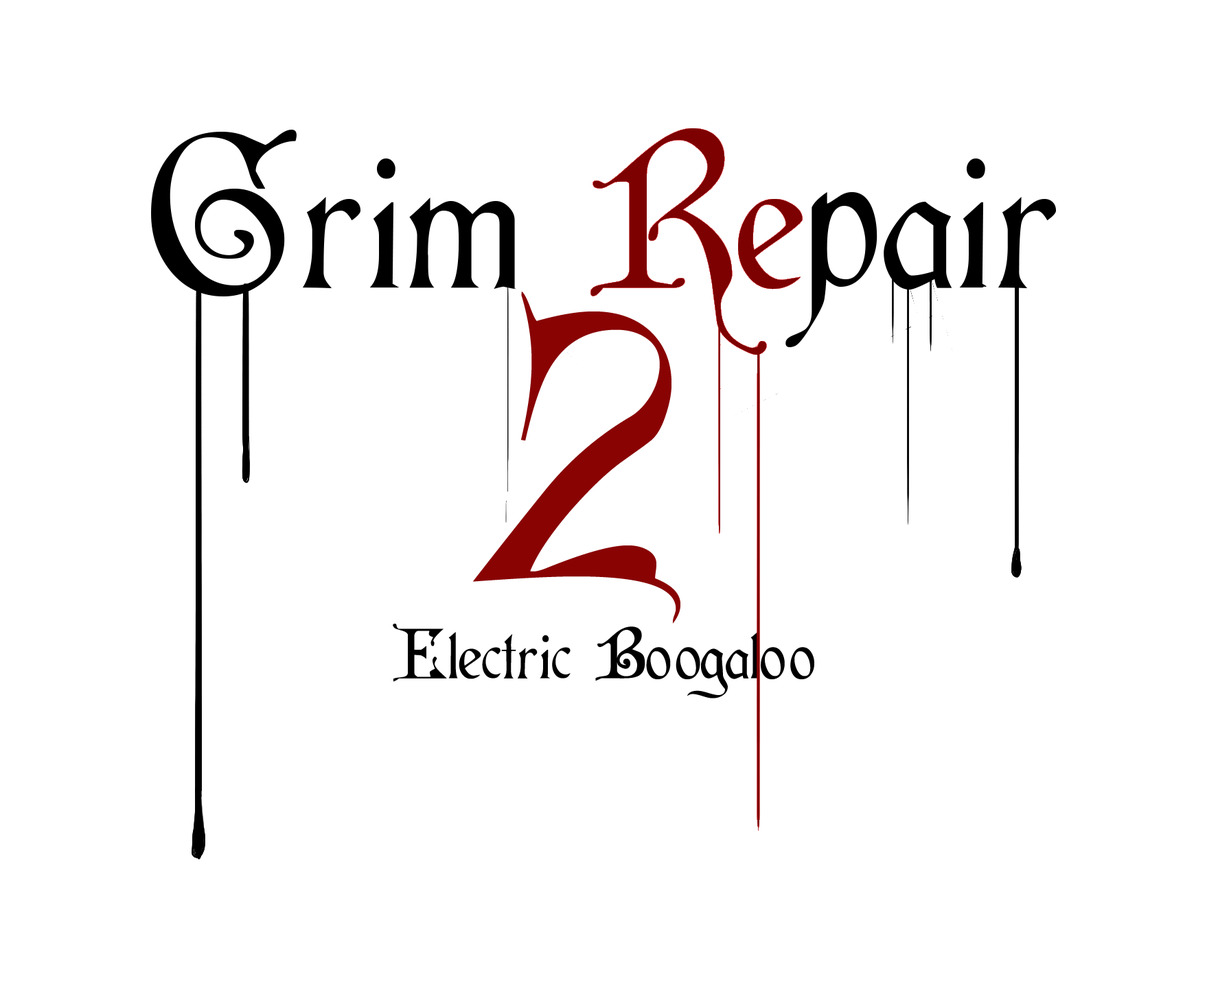
<style>
.page{position:relative;width:1207px;height:988px;background:#ffffff}
.page>*{position:absolute;margin:0}
.t1{font:343.2px "Cardinal-Regular";color:#890303}
.t2{font:68.6px "Cardinal-Regular";color:#000000}
.t3{font:29.7px "Cardinal-Regular";color:#d03821}
</style>
<div class="page">
<p class="t1" style="left:472px;top:292px;width:208px;height:332px">2</p>
<p class="t2" style="left:393px;top:624px;width:421px;height:75px"><span class="t3"><br><br></span>Electric Boogaloo</p>
</div>
